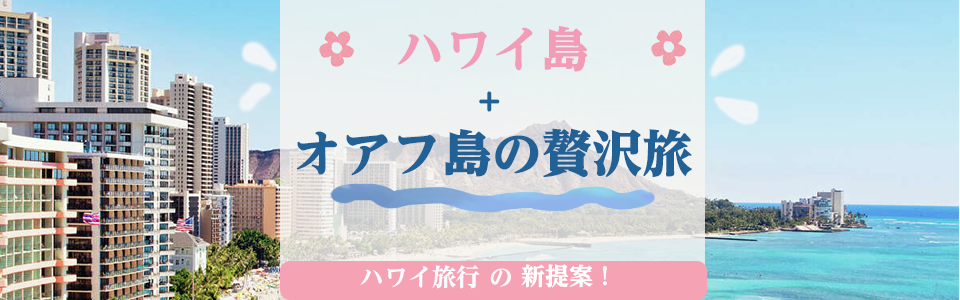
<style>
.page{position:relative;width:960px;height:300px}
.page>*{position:absolute;margin:0}
.t1{font:48px "ReimYfozPro-Heavy";color:#f29cb8}
.t2{font:28.6px "UDShinMGoPro-Heavy";color:#226196}
.t3{font:50px "ReimYfozPro-ExHeavy";color:#226196}
.t4{font:24px "UDReiminPro-Heavy";color:#f9fcff}
.t5{font:24px "UDReiminPro-Heavy";color:#fbfbfb}
.t6{font:24px "ReimYfozPro-Heavy";color:#ffffff}
</style>
<div class="page">
<p class="t1" style="left:398px;top:26px;width:190px;height:46px">ハワイ島</p>
<p class="t2" style="left:479px;top:91px;width:21px;height:21px">+</p>
<p class="t3" style="left:296px;top:128px;width:396px;height:49px">オアフ島の贅沢旅</p>
<p class="t4" style="left:360px;top:265px;width:120px;height:24px">ハワイ旅行</p>
<p class="t5" style="left:490px;top:268px;width:21px;height:19px">の</p>
<p class="t6" style="left:521px;top:264px;width:86px;height:24px">新提案！</p>
</div>
